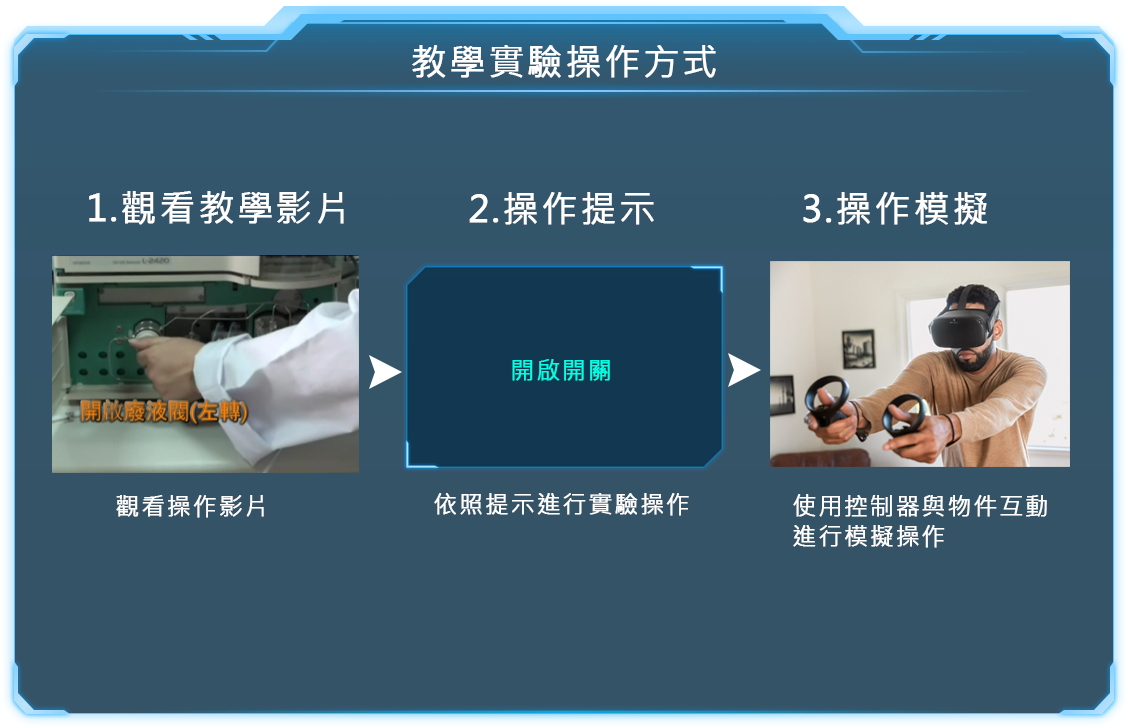
<style>
.page{position:relative;width:1128px;height:728px}
.page>*{position:absolute;margin:0}
.t1{font:36px "MicrosoftJhengHeiRegular";letter-spacing:0.05em;color:#ffffff;font-weight:bold}
.t2{font:24px "MicrosoftJhengHeiRegular";letter-spacing:0.05em;color:#02ffe4;font-weight:bold}
.t3{font:24px "MicrosoftJhengHeiRegular";letter-spacing:0.05em;color:#fefefe;font-weight:bold}
.t4{font:24px/10px "MicrosoftJhengHeiRegular";letter-spacing:0.05em;color:#fefefe;font-weight:bold}
</style>
<div class="page">
<p class="t1" style="left:412px;top:45px;width:304px;height:33px">教學實驗操作方式</p>
<p class="t1" style="left:89px;top:191px;width:255px;height:34px">1.觀看教學影片</p>
<p class="t1" style="left:469px;top:192px;width:185px;height:33px">2.操作提示</p>
<p class="t1" style="left:803px;top:192px;width:184px;height:33px">3.操作模擬</p>
<p class="t2" style="left:512px;top:359px;width:98px;height:22px">開啟開關</p>
<p class="t3" style="left:116px;top:495px;width:148px;height:23px">觀看操作影片</p>
<p class="t3" style="left:434px;top:493px;width:255px;height:23px">依照提示進行實驗操作</p>
<p class="t4" style="left:793px;top:494px;width:254px;height:54px">使用控制器與物件互動<br><br><br>進行模擬操作</p>
</div>
